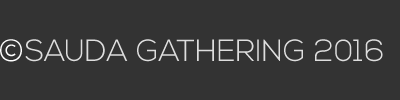
<style>
.page{position:relative;width:400px;height:100px;background:#333333}
.page>*{position:absolute;margin:0}
.t1{font:30.5px "NexaLight";color:#dedede}
</style>
<div class="page">
<p class="t1" style="left:25px;top:39px;width:358px;height:23px">SAUDA GATHERING 2016</p>
</div>
